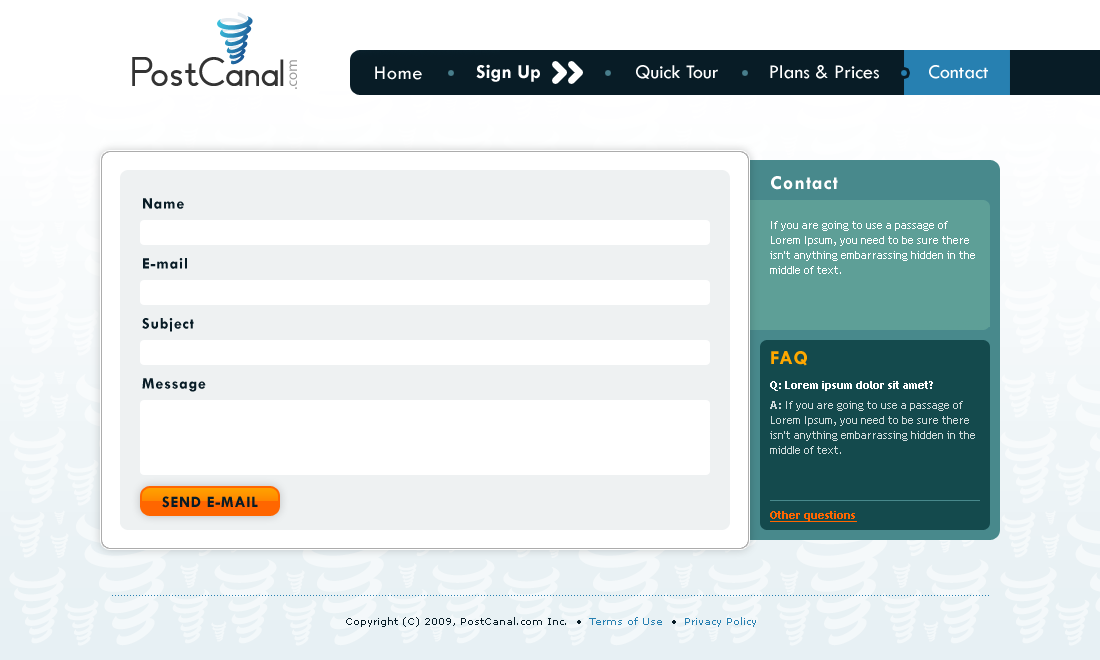
<style>
.page{position:relative;width:1100px;height:660px;background:#ffffff}
.page>*{position:absolute;margin:0}
.t1{font:20px "TwCenMT-Bold";color:#ffffff}
.t2{font:20px "TwCenMT-Regular";color:#ffffff}
.t3{font:20px "TwCenMT-Regular";letter-spacing:0.05em;color:#ffffff}
.t4{font:20px "TwCenMT-Bold";letter-spacing:0.05em;color:#ffffff}
.t5{font:16px/20px "TwCenMT-Bold";letter-spacing:0.05em;color:#081c26}
.t6{font:11px/15px "TrebuchetMS";color:#ffffff}
.t7{font:20px "TwCenMT-Bold";letter-spacing:0.05em;color:#ffa800}
.t8{font:11px "TrebuchetMS-Bold";color:#ffffff}
.t9{font:11px/15px "TrebuchetMS";color:#d0dbdb}
.t10{font:11px/15px "TrebuchetMS-Bold";color:#d0dbdb}
.t11{font:16px "TwCenMT-Bold";letter-spacing:0.05em;color:#081c26;text-transform:uppercase}
.t12{font:11px "TrebuchetMS-Bold";color:#ff6600;text-decoration:underline}
.t13{font:10px "Verdana";color:#081c26}
.t14{font:10px "Verdana";color:#2780b1}
</style>
<div class="page">
<p class="t1" style="left:476px;top:64px;width:64px;height:18px">Sign Up</p>
<p class="t2" style="left:636px;top:65px;width:82px;height:14px">Quick Tour</p>
<p class="t2" style="left:770px;top:65px;width:109px;height:14px">Plans &amp; Prices</p>
<p class="t2" style="left:929px;top:65px;width:59px;height:14px">Contact</p>
<p class="t3" style="left:375px;top:66px;width:47px;height:14px">Home</p>
<p class="t4" style="left:771px;top:176px;width:67px;height:14px">Contact</p>
<p class="t5" style="left:142px;top:198px;width:64px;height:194px">Name<br><br><br>E-mail<br><br><br>Subject<br><br><br>Message</p>
<p class="t6" style="left:770px;top:221px;width:205px;height:53px">If you are going to use a passage of <br>Lorem Ipsum, you need to be sure there<br>isn't anything embarrassing hidden in the <br>middle of text.</p>
<p class="t7" style="left:771px;top:351px;width:36px;height:15px">FAQ</p>
<p class="t8" style="left:770px;top:381px;width:163px;height:10px">Q: Lorem ipsum dolor sit amet?</p>
<p class="t9" style="left:770px;top:401px;width:205px;height:53px"><span class="t10">A:</span> If you are going to use a passage of <br>Lorem Ipsum, you need to be sure there<br>isn't anything embarrassing hidden in the <br>middle of text.</p>
<p class="t11" style="left:162px;top:496px;width:96px;height:12px">send e-mail</p>
<p class="t12" style="left:770px;top:511px;width:87px;height:11px">Other questions</p>
<p class="t13" style="left:346px;top:617px;width:410px;height:10px">Copyright (C) 2009, PostCanal.com Inc.  • <span class="t14"> Terms of Use</span>  •  <span class="t14">Privacy Policy</span></p>
</div>
